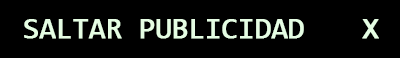
<style>
.page{position:relative;width:400px;height:58px;background:#000000}
.page>*{position:absolute;margin:0}
.t1{font:30px "Consolas";letter-spacing:-0.025em;color:#e5fde3;font-weight:bold}
</style>
<div class="page">
<p class="t1" style="left:24px;top:19px;width:355px;height:20px">SALTAR PUBLICIDAD    X</p>
</div>
